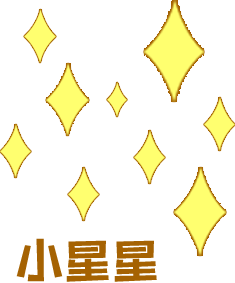
<style>
.page{position:relative;width:235px;height:283px;background:#ffffff}
.page>*{position:absolute;margin:0}
.t1{font:48px "BenmoJianzi";color:#a56202}
</style>
<div class="page">
<p class="t1" style="left:16px;top:238px;width:141px;height:44px">小星星</p>
</div>
